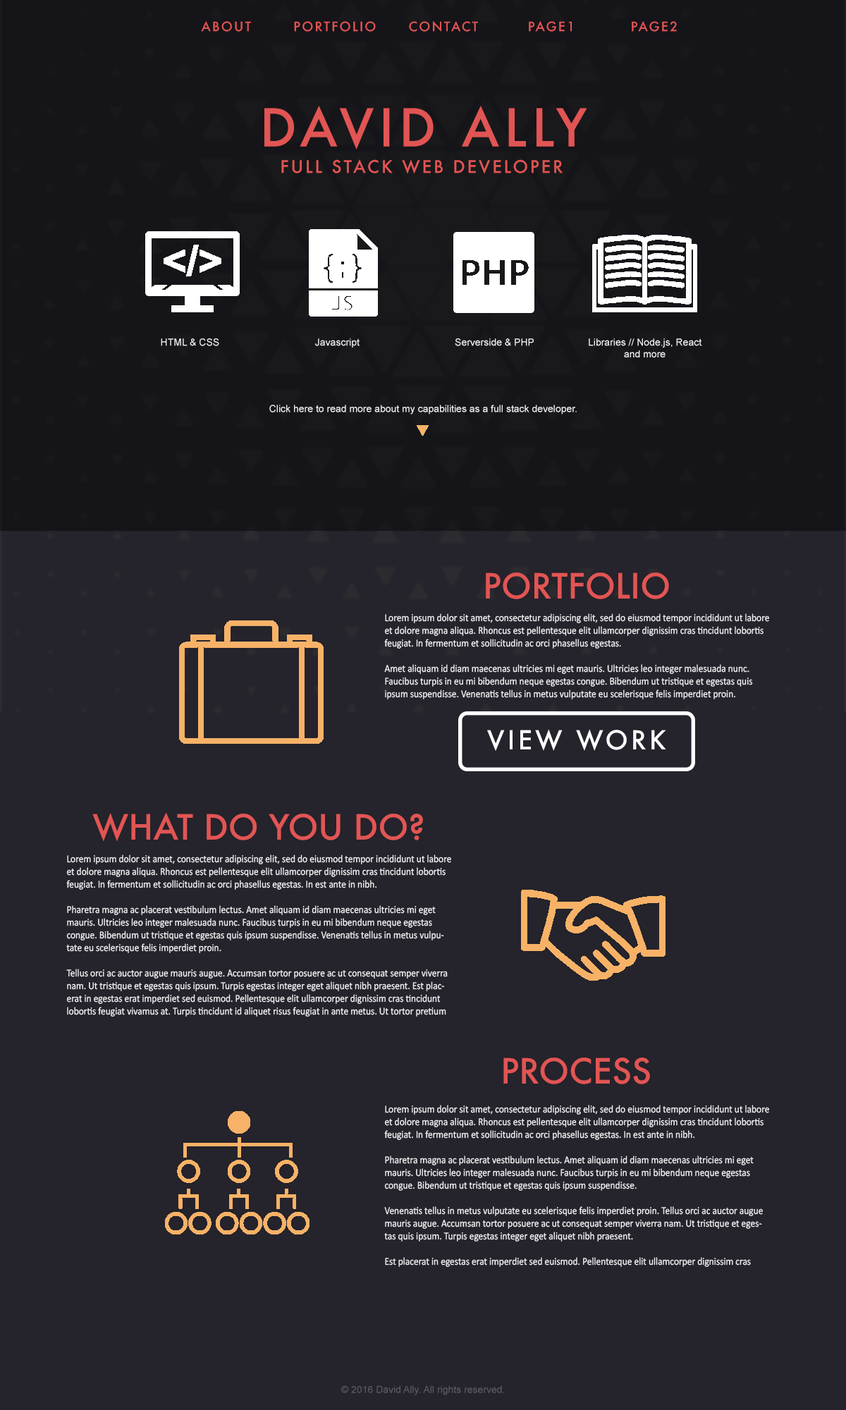
<style>
.page{position:relative;width:846px;height:1410px;background:#25232b}
.page>*{position:absolute;margin:0}
.t1{font:12.7px "Futura-Medium";letter-spacing:0.12em;color:#e15554;text-transform:uppercase}
.t2{font:50.8px "Futura-Medium";letter-spacing:0.1em;color:#e15554}
.t3{font:16.9px "Futura-Medium";letter-spacing:0.12em;color:#e15554;text-transform:uppercase}
.t4{font:9.9px "ArialMT";color:#eff1f3}
.t5{font:33.8px "Futura-Medium";color:#e15554}
.t6{font:10.6px "Calibri";color:#eff1f3;scale:0.9 1}
.t7{font:25.4px "Futura-Medium";letter-spacing:0.12em;color:#ffffff}
.t8{font:9.9px "ArialMT";color:#5b5b5b}
</style>
<div class="page">
<p class="t1" style="left:201px;top:21px;width:50px;height:11px">ABOUT</p>
<p class="t1" style="left:294px;top:21px;width:82px;height:11px">PORTFOLIO</p>
<p class="t1" style="left:409px;top:20px;width:69px;height:12px">CONTACT</p>
<p class="t1" style="left:529px;top:21px;width:43px;height:11px">PAGE1</p>
<p class="t1" style="left:632px;top:21px;width:45px;height:11px">PAGE2</p>
<p class="t2" style="left:264px;top:106px;width:323px;height:43px">DAVID ALLY</p>
<p class="t3" style="left:281px;top:159px;width:281px;height:15px">Full Stack Web Developer</p>
<p class="t4" style="left:161px;top:338px;width:58px;height:8px">HTML &amp; CSS</p>
<p class="t4" style="left:315px;top:338px;width:44px;height:10px">Javascript</p>
<p class="t4" style="left:455px;top:338px;width:79px;height:8px">Serverside &amp; PHP</p>
<p class="t4" style="left:589px;top:338px;width:113px;height:19px;text-align:center">Libraries // Node.js, React and more</p>
<p class="t4" style="left:269px;top:405px;width:308px;height:9px">Click here to read more about my capabilities as a full stack developer.</p>
<p class="t5" style="left:486px;top:572px;width:183px;height:27px">PORTFOLIO</p>
<p class="t6" style="left:384px;top:613px;width:385px;height:86px">Lorem ipsum dolor sit amet, consectetur adipiscing elit, sed do eiusmod tempor incididunt ut labore et dolore magna aliqua. Rhoncus est pellentesque elit ullamcorper dignissim cras tincidunt lobortis feugiat. In fermentum et sollicitudin ac orci phasellus egestas. <br><br>Amet aliquam id diam maecenas ultricies mi eget mauris. Ultricies leo integer malesuada nunc. Faucibus turpis in eu mi bibendum neque egestas congue. Bibendum ut tristique et egestas quis ipsum suspendisse. Venenatis tellus in metus vulputate eu scelerisque felis imperdiet proin.</p>
<p class="t7" style="left:487px;top:729px;width:179px;height:22px">VIEW WORK</p>
<p class="t5" style="left:92px;top:812px;width:331px;height:30px">WHAT DO YOU DO?</p>
<p class="t6" style="left:66px;top:854px;width:385px;height:162px">Lorem ipsum dolor sit amet, consectetur adipiscing elit, sed do eiusmod tempor incididunt ut labore et dolore magna aliqua. Rhoncus est pellentesque elit ullamcorper dignissim cras tincidunt lobortis feugiat. In fermentum et sollicitudin ac orci phasellus egestas. In est ante in nibh. <br><br>Pharetra magna ac placerat vestibulum lectus. Amet aliquam id diam maecenas ultricies mi eget mauris. Ultricies leo integer malesuada nunc. Faucibus turpis in eu mi bibendum neque egestas congue. Bibendum ut tristique et egestas quis ipsum suspendisse. Venenatis tellus in metus vulputate eu scelerisque felis imperdiet proin. <br><br>Tellus orci ac auctor augue mauris augue. Accumsan tortor posuere ac ut consequat semper viverra nam. Ut tristique et egestas quis ipsum. Turpis egestas integer eget aliquet nibh praesent. Est placerat in egestas erat imperdiet sed euismod. Pellentesque elit ullamcorper dignissim cras tincidunt lobortis feugiat vivamus at. Turpis tincidunt id aliquet risus feugiat in ante metus. Ut tortor pretium viverra suspendisse potenti nullam ac. Sagittis vitae et leo duis ut. Neque gravida in fermentum et sollicitudin ac orci phasellus.</p>
<p class="t5" style="left:503px;top:1057px;width:147px;height:27px">PROCESS</p>
<p class="t6" style="left:384px;top:1105px;width:385px;height:162px">Lorem ipsum dolor sit amet, consectetur adipiscing elit, sed do eiusmod tempor incididunt ut labore et dolore magna aliqua. Rhoncus est pellentesque elit ullamcorper dignissim cras tincidunt lobortis feugiat. In fermentum et sollicitudin ac orci phasellus egestas. In est ante in nibh. <br><br>Pharetra magna ac placerat vestibulum lectus. Amet aliquam id diam maecenas ultricies mi eget mauris. Ultricies leo integer malesuada nunc. Faucibus turpis in eu mi bibendum neque egestas congue. Bibendum ut tristique et egestas quis ipsum suspendisse. <br><br>Venenatis tellus in metus vulputate eu scelerisque felis imperdiet proin. Tellus orci ac auctor augue mauris augue. Accumsan tortor posuere ac ut consequat semper viverra nam. Ut tristique et egestas quis ipsum. Turpis egestas integer eget aliquet nibh praesent. <br><br>Est placerat in egestas erat imperdiet sed euismod. Pellentesque elit ullamcorper dignissim cras tincidunt lobortis feugiat vivamus at. Turpis tincidunt id aliquet risus feugiat in ante metus. Ut tortor pretium viverra suspendisse potenti nullam ac. Sagittis vitae et leo duis ut. Neque gravida in fermentum et sollicitudin ac orci phasellus.</p>
<p class="t8" style="left:341px;top:1385px;width:163px;height:10px">© 2016 David Ally. All rights reserved.</p>
</div>
